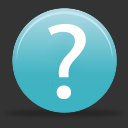
<style>
.page{position:relative;width:128px;height:128px;background:#333333}
.page>*{position:absolute;margin:0}
.t1{font:107.6px "MyriadPro-Regular";color:#ffffff;scale:1.12 1}
</style>
<div class="page">
<p class="t1" style="left:48px;top:24px;width:38px;height:76px">?</p>
</div>
